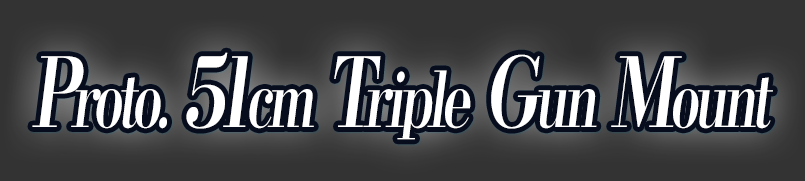
<style>
.page{position:relative;width:805px;height:181px;background:#333333}
.page>*{position:absolute;margin:0}
.t1{font:76.8px "KochoStd-Heavy";letter-spacing:-0.08em;color:#ffffff;font-style:italic;scale:0.71 1}
.t2{font:96px "KochoStd-Heavy";letter-spacing:-0.08em;color:#ffffff;font-style:italic;scale:0.71 1}
</style>
<div class="page">
<p class="t1" style="left:32px;top:52px;width:741px;height:88px"><span class="t2">P</span>roto.<span class="t2"> 51</span>cm<span class="t2"> T</span>riple<span class="t2"> G</span>un<span class="t2"> M</span>ount</p>
</div>
